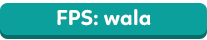
<style>
.page{position:relative;width:207px;height:40px;background:#0ca09c}
.page>*{position:absolute;margin:0}
.t1{font:22px "Linotte-Bold";color:#ffffff}
</style>
<div class="page">
<p class="t1" style="left:57px;top:9px;width:94px;height:17px">FPS: wala</p>
</div>
